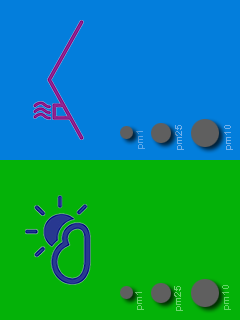
<style>
.page{position:relative;width:240px;height:320px;background:#037edc}
.page>*{position:absolute;margin:0}
.t1{font:10px "ArialRoundedMTBold";color:#71b0eb}
.t2{font:10px "ArialRoundedMTBold";color:#71b0ec}
.t3{font:10px "ArialRoundedMTBold";color:#5ea9ec}
.t4{font:10px "ArialRoundedMTBold";color:#6ad66c}
.t5{font:10px "ArialRoundedMTBold";color:#6bd76d}
.t6{font:10px "ArialRoundedMTBold";color:#61d764}
</style>
<div class="page">
<p class="t1" style="left:175px;top:125px;width:9px;height:25px;rotate:-90deg">pm25</p>
<p class="t2" style="left:224px;top:125px;width:9px;height:25px;rotate:-90deg">pm10</p>
<p class="t3" style="left:136px;top:131px;width:9px;height:18px;rotate:-90deg">pm1</p>
<p class="t4" style="left:135px;top:292px;width:9px;height:18px;rotate:-90deg">pm1</p>
<p class="t5" style="left:174px;top:286px;width:9px;height:25px;rotate:-90deg">pm25</p>
<p class="t6" style="left:222px;top:285px;width:9px;height:25px;rotate:-90deg">pm10</p>
</div>
